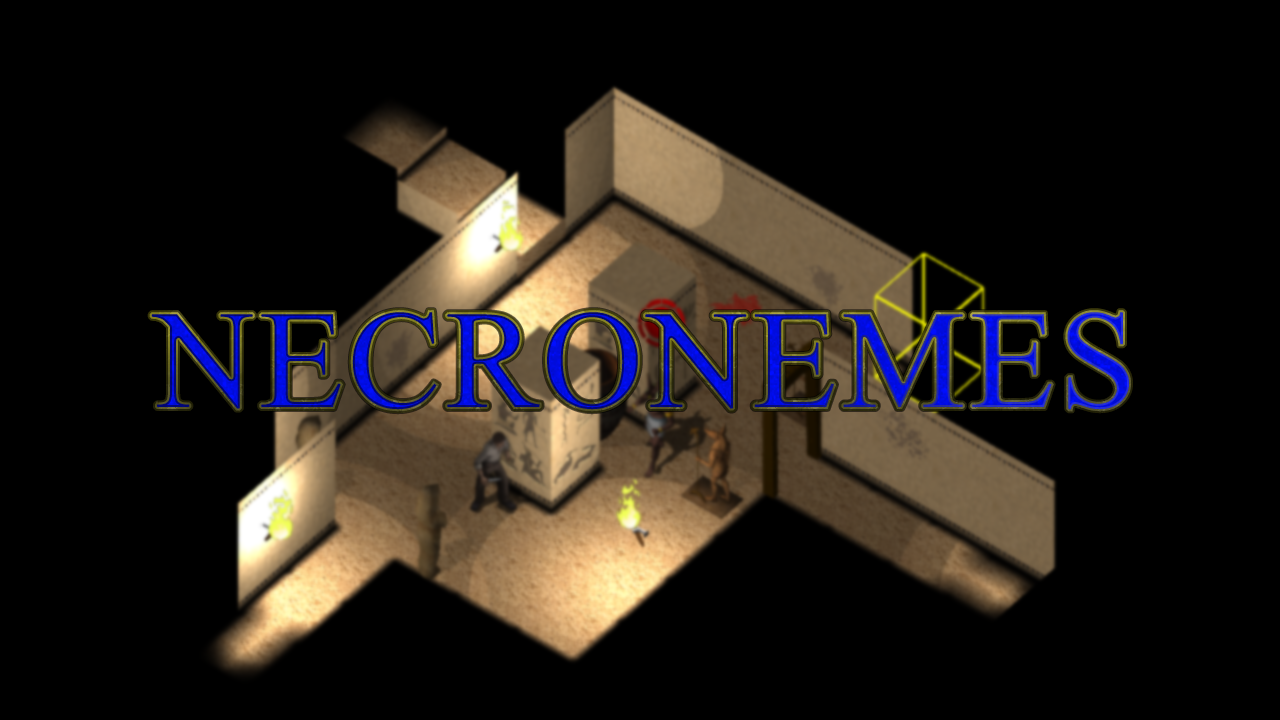
<style>
.page{position:relative;width:1280px;height:720px;background:#000000}
.page>*{position:absolute;margin:0}
.t1{font:140px "TimesNewRomanPSMT";font-weight:bold}
</style>
<div class="page">
<p class="t1" style="left:149px;top:310px;width:982px;height:102px">NECRONEMES</p>
</div>
